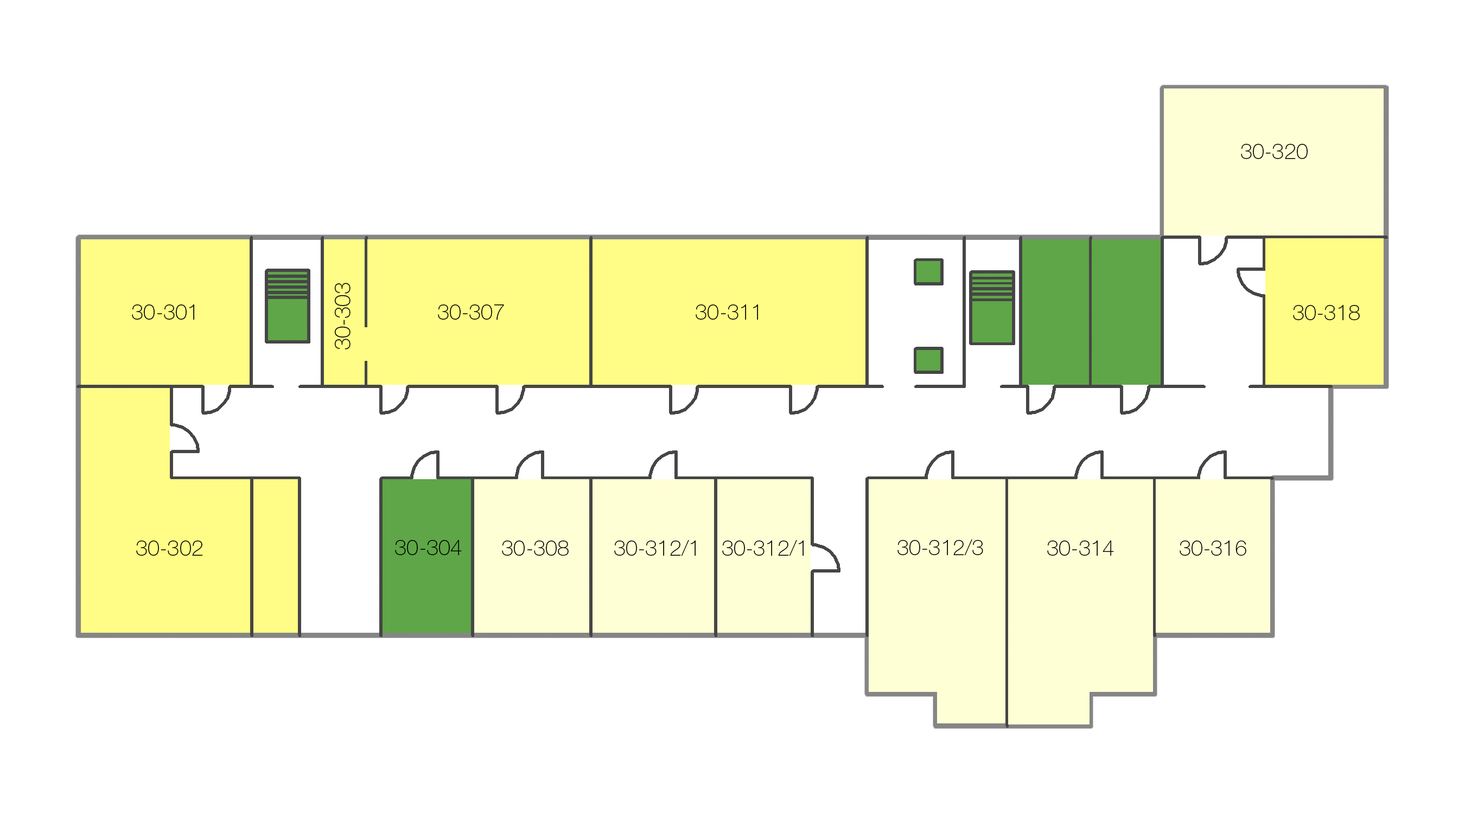
<style>
.page{position:relative;width:1465px;height:814px;background:#ffffff}
.page>*{position:absolute;margin:0}
.t1{font:21.7px "HelveticaNeueCyr-Thin";color:#000000;font-variant:small-caps}
</style>
<div class="page">
<p class="t1" style="left:1241px;top:144px;width:67px;height:15px">30-320</p>
<p class="t1" style="left:334px;top:283px;width:17px;height:66px;rotate:-90deg">30-303</p>
<p class="t1" style="left:132px;top:304px;width:62px;height:16px">30-301</p>
<p class="t1" style="left:438px;top:304px;width:66px;height:16px">30-307</p>
<p class="t1" style="left:696px;top:304px;width:62px;height:16px">30-311</p>
<p class="t1" style="left:1293px;top:305px;width:67px;height:15px">30-318</p>
<p class="t1" style="left:136px;top:540px;width:67px;height:16px">30-302</p>
<p class="t1" style="left:395px;top:540px;width:67px;height:15px">30-304</p>
<p class="t1" style="left:502px;top:540px;width:67px;height:16px">30-308</p>
<p class="t1" style="left:614px;top:540px;width:82px;height:16px">30-312/1</p>
<p class="t1" style="left:722px;top:540px;width:82px;height:16px">30-312/1</p>
<p class="t1" style="left:897px;top:539px;width:86px;height:16px">30-312/3</p>
<p class="t1" style="left:1047px;top:540px;width:67px;height:16px">30-314</p>
<p class="t1" style="left:1180px;top:540px;width:66px;height:16px">30-316</p>
</div>
